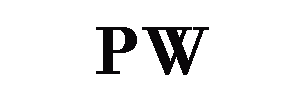
<style>
.page{position:relative;width:300px;height:100px;background:#ffffff}
.page>*{position:absolute;margin:0}
.t1{font:70px "BodoniMT";color:#090709;font-weight:bold}
</style>
<div class="page">
<p class="t1" style="left:96px;top:27px;width:113px;height:48px">PW</p>
</div>
